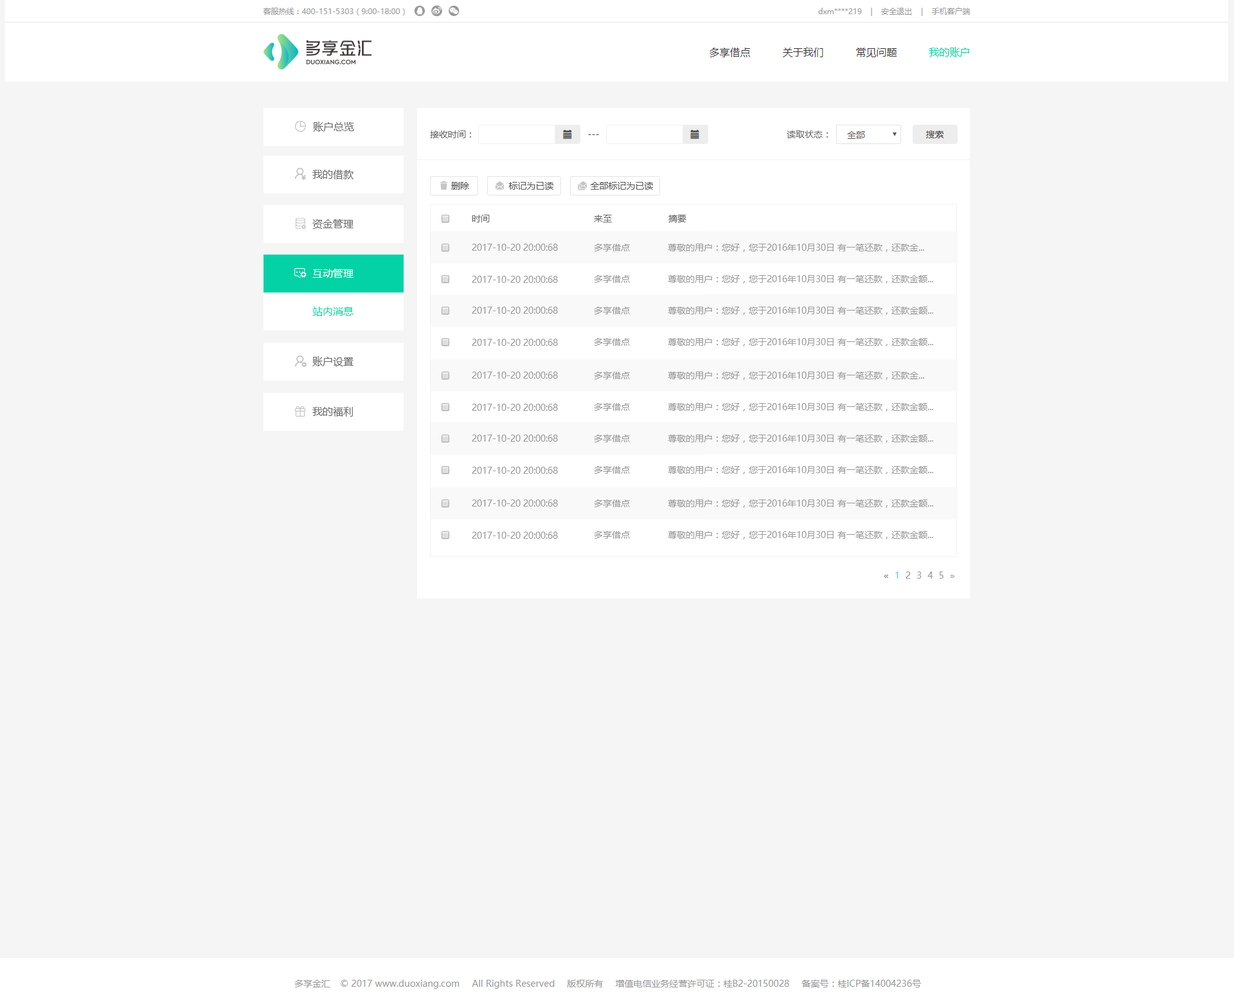
<style>
.page{position:relative;width:1234px;height:1008px;background:#f5f5f5}
.page>*{position:absolute;margin:0}
.t1{font:10.3px "MicrosoftYaHei";color:#02d2a6}
.t2{font:10.3px "MicrosoftYaHei";color:#666666}
.t3{font:9px "MicrosoftYaHei";color:#666666}
.t4{font:9px "MicrosoftYaHei";color:#565656}
.t5{font:9px "MicrosoftYaHei";color:#999999}
.t6{font:10.3px "MicrosoftYaHei";color:#ffffff}
</style>
<div class="page">
<p class="t1" style="left:929px;top:47px;width:40px;height:10px">我的账户</p>
<p class="t2" style="left:313px;top:122px;width:41px;height:10px">账户总览</p>
<p class="t3" style="left:430px;top:130px;width:41px;height:8px">接收时间：</p>
<p class="t3" style="left:787px;top:130px;width:41px;height:8px">读取状态：</p>
<p class="t2" style="left:312px;top:170px;width:42px;height:9px">我的借款</p>
<p class="t4" style="left:451px;top:182px;width:18px;height:8px">删除</p>
<p class="t4" style="left:509px;top:182px;width:45px;height:8px">标记为已读</p>
<p class="t4" style="left:590px;top:182px;width:63px;height:8px">全部标记为已读</p>
<p class="t2" style="left:312px;top:219px;width:42px;height:10px">资金管理</p>
<p class="t3" style="left:472px;top:215px;width:18px;height:7px">时间</p>
<p class="t3" style="left:594px;top:215px;width:18px;height:7px">来至</p>
<p class="t3" style="left:669px;top:215px;width:18px;height:7px">摘要</p>
<p class="t5" style="left:472px;top:244px;width:86px;height:7px">2017-10-20 20:00:68</p>
<p class="t5" style="left:594px;top:244px;width:36px;height:7px">多享借点</p>
<p class="t5" style="left:668px;top:244px;width:256px;height:8px">尊敬的用户：您好，您于2016年10月30日 有一笔还款，还款金...</p>
<p class="t6" style="left:312px;top:269px;width:42px;height:9px">互动管理</p>
<p class="t5" style="left:472px;top:276px;width:86px;height:7px">2017-10-20 20:00:68</p>
<p class="t5" style="left:594px;top:275px;width:36px;height:8px">多享借点</p>
<p class="t5" style="left:668px;top:275px;width:265px;height:9px">尊敬的用户：您好，您于2016年10月30日 有一笔还款，还款金额...</p>
<p class="t1" style="left:312px;top:307px;width:42px;height:9px">站内消息</p>
<p class="t5" style="left:472px;top:307px;width:86px;height:7px">2017-10-20 20:00:68</p>
<p class="t5" style="left:594px;top:307px;width:36px;height:7px">多享借点</p>
<p class="t5" style="left:668px;top:307px;width:265px;height:8px">尊敬的用户：您好，您于2016年10月30日 有一笔还款，还款金额...</p>
<p class="t5" style="left:472px;top:339px;width:86px;height:7px">2017-10-20 20:00:68</p>
<p class="t5" style="left:594px;top:338px;width:36px;height:8px">多享借点</p>
<p class="t5" style="left:668px;top:338px;width:265px;height:8px">尊敬的用户：您好，您于2016年10月30日 有一笔还款，还款金额...</p>
<p class="t2" style="left:312px;top:356px;width:42px;height:10px">账户设置</p>
<p class="t5" style="left:472px;top:372px;width:86px;height:7px">2017-10-20 20:00:68</p>
<p class="t5" style="left:594px;top:372px;width:36px;height:7px">多享借点</p>
<p class="t5" style="left:668px;top:372px;width:256px;height:8px">尊敬的用户：您好，您于2016年10月30日 有一笔还款，还款金...</p>
<p class="t2" style="left:312px;top:407px;width:41px;height:10px">我的福利</p>
<p class="t5" style="left:472px;top:404px;width:86px;height:7px">2017-10-20 20:00:68</p>
<p class="t5" style="left:594px;top:403px;width:36px;height:8px">多享借点</p>
<p class="t5" style="left:668px;top:403px;width:265px;height:8px">尊敬的用户：您好，您于2016年10月30日 有一笔还款，还款金额...</p>
<p class="t5" style="left:472px;top:435px;width:86px;height:7px">2017-10-20 20:00:68</p>
<p class="t5" style="left:594px;top:435px;width:36px;height:7px">多享借点</p>
<p class="t5" style="left:668px;top:435px;width:265px;height:8px">尊敬的用户：您好，您于2016年10月30日 有一笔还款，还款金额...</p>
<p class="t5" style="left:472px;top:467px;width:86px;height:7px">2017-10-20 20:00:68</p>
<p class="t5" style="left:594px;top:466px;width:36px;height:8px">多享借点</p>
<p class="t5" style="left:668px;top:466px;width:265px;height:8px">尊敬的用户：您好，您于2016年10月30日 有一笔还款，还款金额...</p>
<p class="t5" style="left:472px;top:500px;width:86px;height:7px">2017-10-20 20:00:68</p>
<p class="t5" style="left:594px;top:500px;width:36px;height:7px">多享借点</p>
<p class="t5" style="left:668px;top:500px;width:265px;height:8px">尊敬的用户：您好，您于2016年10月30日 有一笔还款，还款金额...</p>
<p class="t5" style="left:472px;top:532px;width:86px;height:7px">2017-10-20 20:00:68</p>
<p class="t5" style="left:594px;top:531px;width:36px;height:8px">多享借点</p>
<p class="t5" style="left:668px;top:531px;width:265px;height:8px">尊敬的用户：您好，您于2016年10月30日 有一笔还款，还款金额...</p>
</div>
